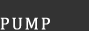
<style>
.page{position:relative;width:89px;height:31px;background:#333333}
.page>*{position:absolute;margin:0}
.t1{font:17.2px "Cambria";letter-spacing:0.115em;color:#ffffff}
</style>
<div class="page">
<p class="t1" style="left:0px;top:17px;width:50px;height:13px">PUMP</p>
</div>
